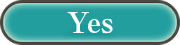
<style>
.page{position:relative;width:180px;height:45px}
.page>*{position:absolute;margin:0}
.t1{font:28px "RyuminPro-ExBold";color:#fdfbf9}
</style>
<div class="page">
<p class="t1" style="left:67px;top:12px;width:46px;height:22px">Yes</p>
</div>
